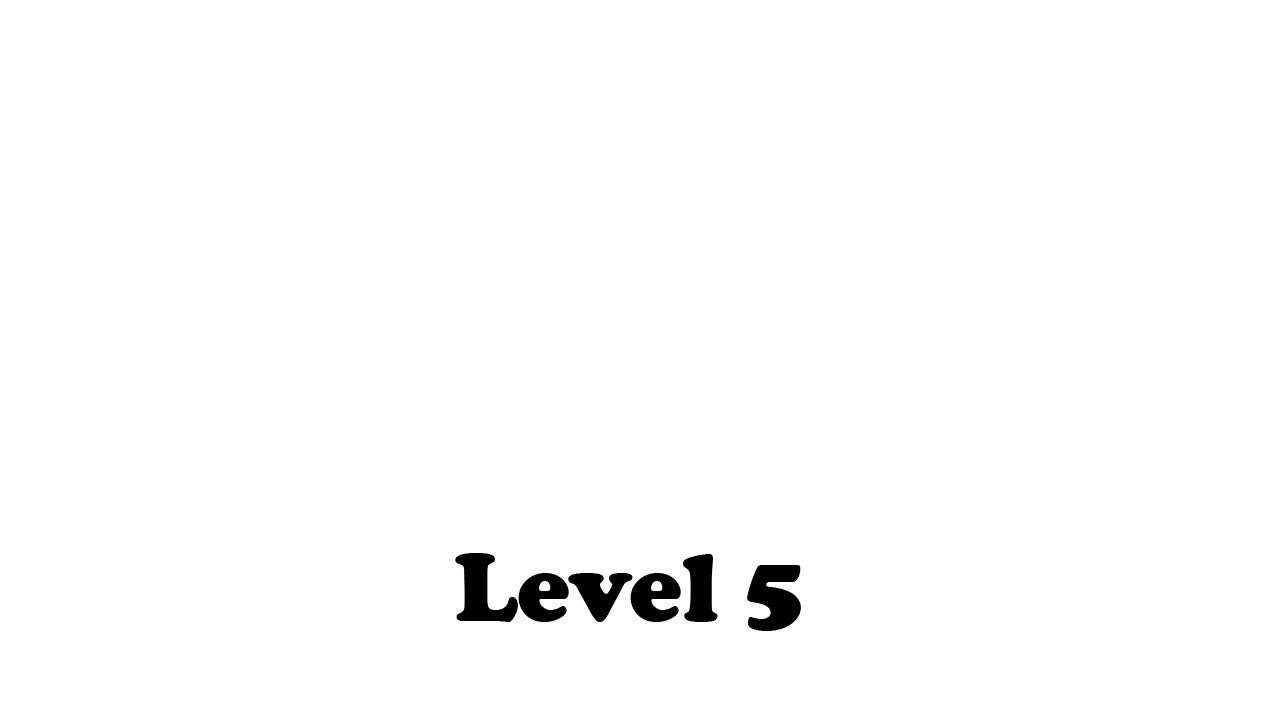
<style>
.page{position:relative;width:1280px;height:720px;background:#ffffff}
.page>*{position:absolute;margin:0}
.t1{font:100px "CooperBlack";color:#000000}
</style>
<div class="page">
<p class="t1" style="left:455px;top:553px;width:346px;height:78px">Level 5</p>
</div>
